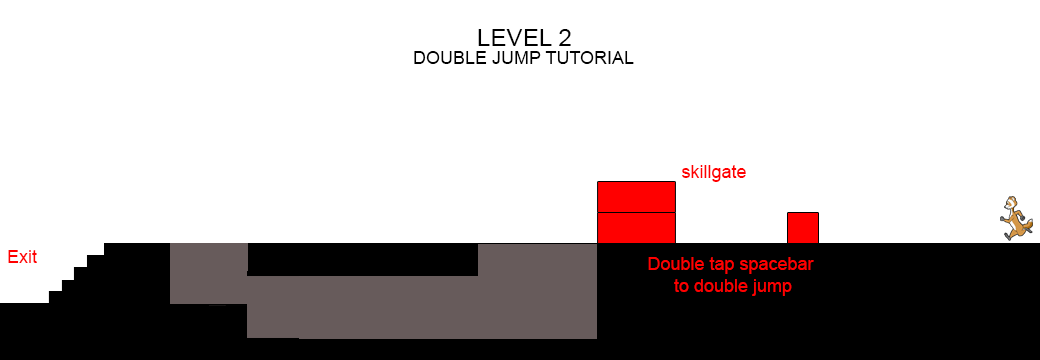
<style>
.page{position:relative;width:1040px;height:360px;background:#ffffff}
.page>*{position:absolute;margin:0}
.t1{font:24px "ArialMT";color:#000000}
.t2{font:18px "ArialMT";color:#000000}
.t3{font:18px "ArialMT";color:#ff0000}
</style>
<div class="page">
<p class="t1" style="left:478px;top:29px;width:93px;height:17px">LEVEL 2</p>
<p class="t2" style="left:414px;top:51px;width:220px;height:13px">DOUBLE JUMP TUTORIAL</p>
<p class="t3" style="left:682px;top:165px;width:64px;height:17px">skillgate</p>
<p class="t3" style="left:8px;top:250px;width:29px;height:13px">Exit</p>
<p class="t3" style="left:648px;top:257px;width:166px;height:39px;text-align:center">Double tap spacebar <br>to double jump</p>
</div>
